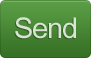
<style>
.page{position:relative;width:91px;height:59px}
.page>*{position:absolute;margin:0}
.t1{font:28.7px "ArialUnicodeMS";letter-spacing:-0.04em;color:#d9e5d4}
</style>
<div class="page">
<p class="t1" style="left:15px;top:17px;width:61px;height:22px">Send</p>
</div>
